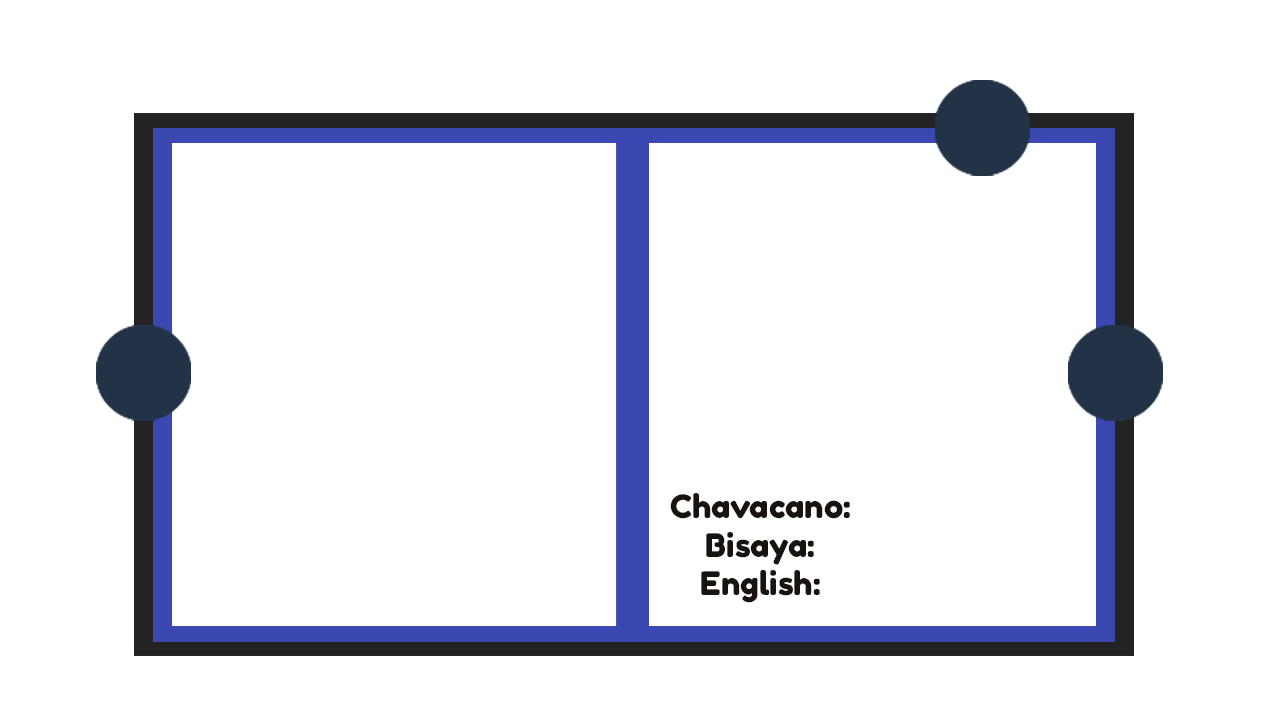
<style>
.page{position:relative;width:1280px;height:720px;background:#ffffff}
.page>*{position:absolute;margin:0}
.t1{font:32.2px "FredokaOne-Regular";color:#18130f}
</style>
<div class="page">
<p class="t1" style="left:670px;top:493px;width:180px;height:110px;text-align:center">Chavacano:<br>Bisaya:<br>English:</p>
</div>
